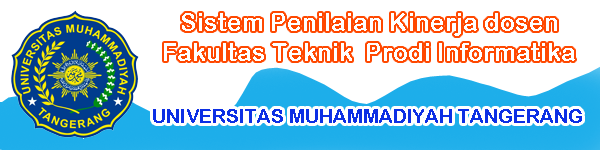
<style>
.page{position:relative;width:600px;height:150px;background:#ffffff}
.page>*{position:absolute;margin:0}
.t1{font:25px "ArialRoundedMTBold";color:#ffffff}
.t2{font:19.4px "ArialRoundedMTBold";color:#0c2fe4}
</style>
<div class="page">
<p class="t1" style="left:164px;top:13px;width:411px;height:48px;text-align:center">Sistem Penilaian Kinerja dosen<br>Fakultas Teknik  Prodi Informatika</p>
<p class="t2" style="left:153px;top:109px;width:429px;height:14px">UNIVERSITAS MUHAMMADIYAH TANGERANG</p>
</div>
